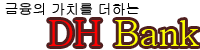
<style>
.page{position:relative;width:200px;height:50px;background:#ffffff}
.page>*{position:absolute;margin:0}
.t1{font:14px "Gulim";color:#000000}
.t2{font:36px "Batang";color:#ffff00}
.t3{font:36px "Batang";color:#ff0000}
</style>
<div class="page">
<p class="t1" style="left:5px;top:3px;width:134px;height:13px">금융의 가치를 더하는</p>
<p class="t2" style="left:49px;top:20px;width:150px;height:26px"><span class="t3">DH </span>Bank</p>
</div>
